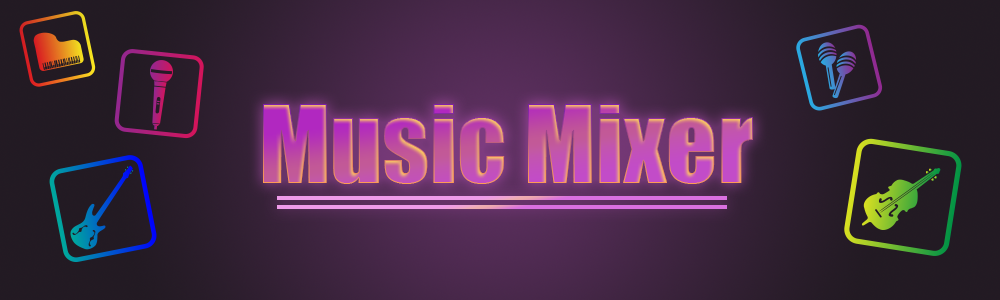
<style>
.page{position:relative;width:1000px;height:300px}
.page>*{position:absolute;margin:0}
.t1{font:100px "Impact"}
</style>
<div class="page">
<p class="t1" style="left:263px;top:104px;width:490px;height:80px">Music Mixer</p>
</div>
